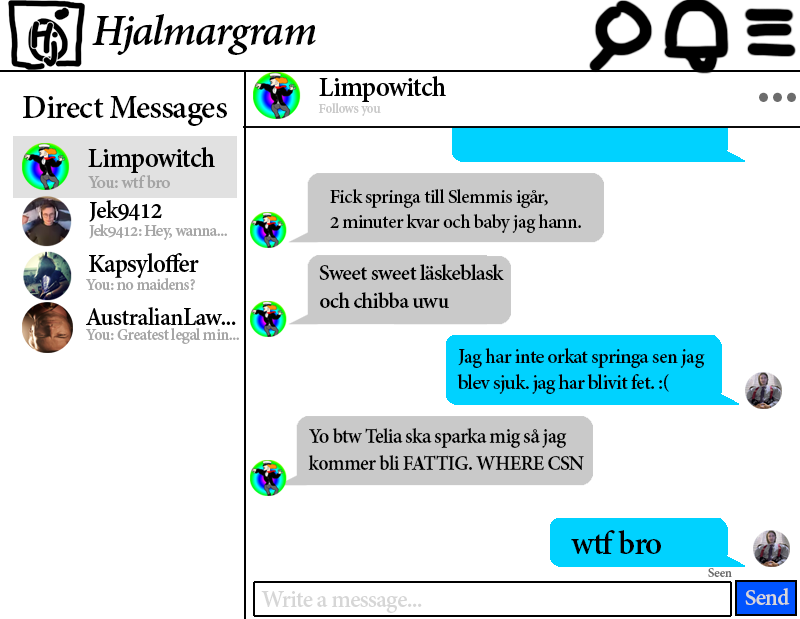
<style>
.page{position:relative;width:800px;height:619px;background:#ffffff}
.page>*{position:absolute;margin:0}
.t1{font:36px "AdobeDevanagari-Bold";letter-spacing:-0.03em;color:#000000}
.t2{font:71.5px "AdobeDevanagari-Bold";letter-spacing:-0.03em;color:#6c6c6c}
.t3{font:14.8px "AdobeDevanagari-Bold";letter-spacing:-0.03em;color:#c9c9c9}
.t4{font:21.1px "AdobeDevanagari-Bold";letter-spacing:-0.03em;color:#000000}
.t5{font:23.4px "AdobeDevanagari-Bold";letter-spacing:-0.03em;color:#000000}
.t6{font:21.7px "AdobeDevanagari-Bold";letter-spacing:-0.03em;color:#000000}
.t7{font:21.9px "AdobeDevanagari-Bold";letter-spacing:-0.03em;color:#000000}
.t8{font:14.1px "AdobeDevanagari-Bold";letter-spacing:-0.03em;color:#6c6c6c}
.t9{font:25.7px "AdobeDevanagari-Bold";letter-spacing:-0.03em;color:#d6d6d6}
.t10{font:24.7px "AdobeDevanagari-Bold";letter-spacing:-0.03em;color:#d6d6d6}
</style>
<div class="page">
<p class="t1" style="left:23px;top:96px;width:204px;height:30px">Direct Messages</p>
<p class="t2" style="left:759px;top:92px;width:37px;height:10px">...</p>
<p class="t3" style="left:318px;top:103px;width:63px;height:13px">Follows you</p>
<p class="t4" style="left:330px;top:189px;width:251px;height:44px">Fick springa till Slemmis igår,<br>2 minuter kvar och baby jag hann.</p>
<p class="t5" style="left:319px;top:264px;width:185px;height:44px">Sweet sweet läskeblask<br>och chibba uwu</p>
<p class="t6" style="left:457px;top:348px;width:248px;height:46px">Jag har inte orkat springa sen jag <br>blev sjuk. jag har blivit fet. :(</p>
<p class="t7" style="left:308px;top:428px;width:276px;height:42px">Yo btw Telia ska sparka mig så jag<br>kommer bli FATTIG. WHERE CSN</p>
<p class="t1" style="left:571px;top:530px;width:90px;height:24px">wtf bro</p>
<p class="t8" style="left:708px;top:568px;width:24px;height:9px">Seen</p>
<p class="t9" style="left:261px;top:591px;width:161px;height:22px">Write a message...</p>
<p class="t10" style="left:745px;top:588px;width:45px;height:17px">Send</p>
</div>
